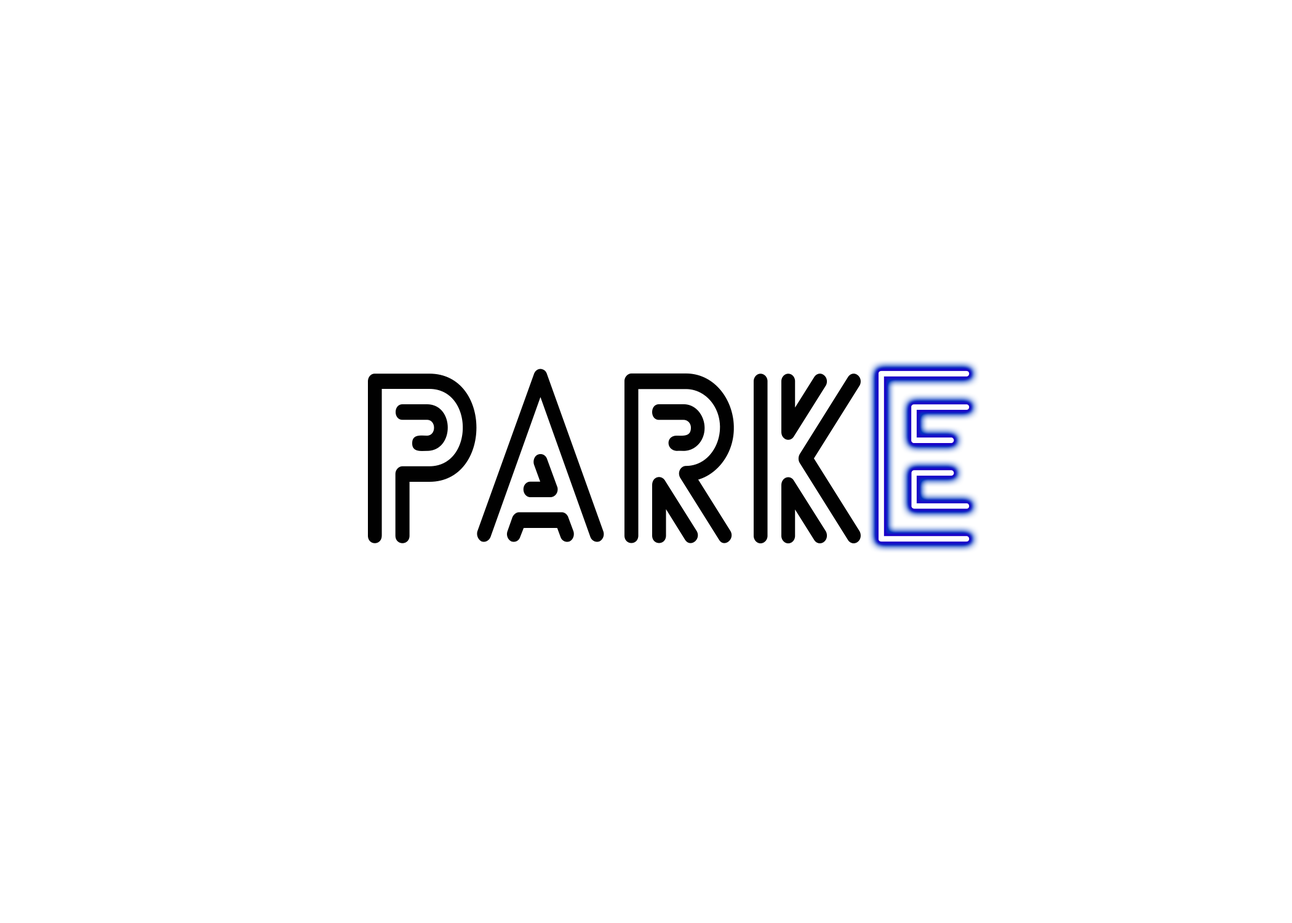
<style>
.page{position:relative;width:1292px;height:923px;background:#ffffff}
.page>*{position:absolute;margin:0}
.t1{font:230.7px "LoveloLineBold";color:#010101;scale:0.9 1}
.t2{font:230.7px "LoveloLineLight";color:#ffffff}
</style>
<div class="page">
<p class="t1" style="left:368px;top:369px;width:493px;height:174px">Park</p>
<p class="t2" style="left:879px;top:370px;width:91px;height:172px">E</p>
<p class="t2" style="left:879px;top:370px;width:91px;height:172px">E</p>
</div>
